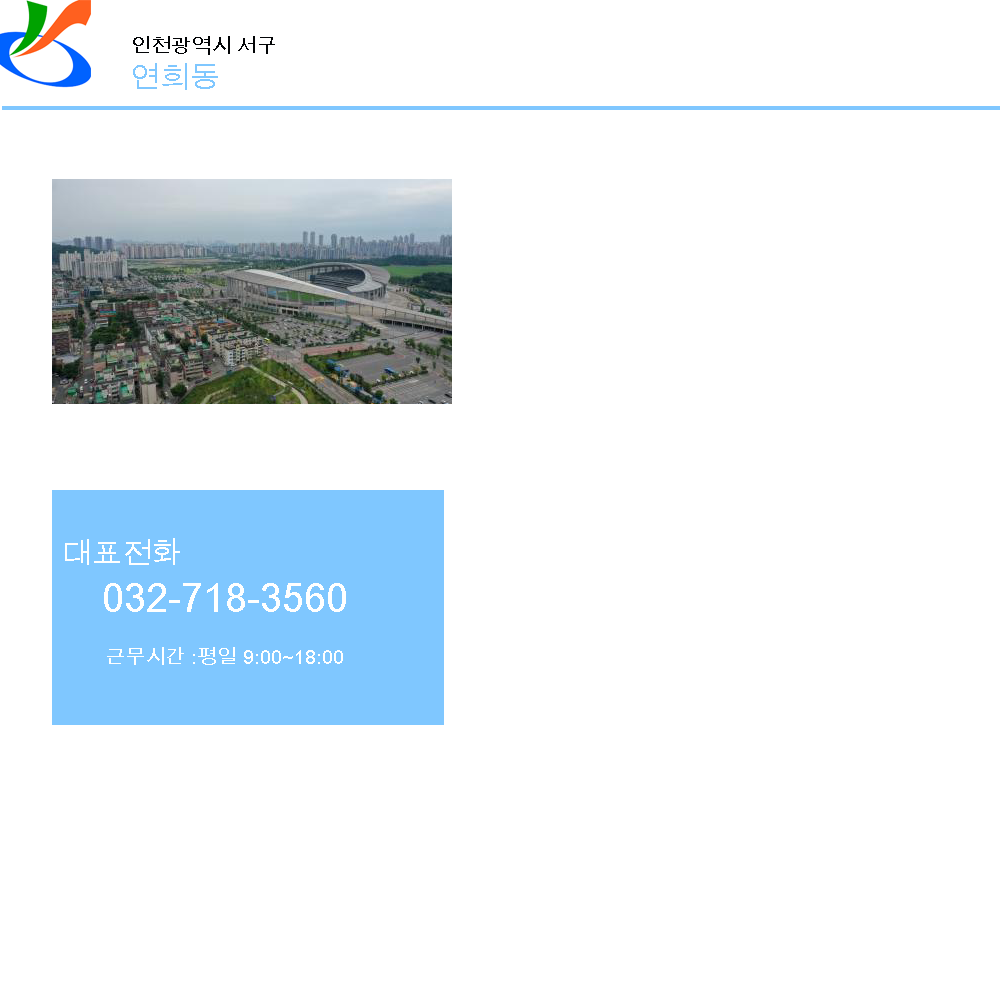
<style>
.page{position:relative;width:1000px;height:1000px;background:#ffffff}
.page>*{position:absolute;margin:0}
.t1{font:20px "ArialUnicodeMS";color:#030507}
.t2{font:30px "ArialUnicodeMS";color:#7fc7ff}
.t3{font:30px "ArialUnicodeMS";color:#ffffff}
.t4{font:40px "ArialUnicodeMS";color:#ffffff}
.t5{font:20px "ArialUnicodeMS";color:#ffffff}
</style>
<div class="page">
<p class="t1" style="left:133px;top:36px;width:142px;height:19px">인천광역시 서구</p>
<p class="t2" style="left:133px;top:63px;width:85px;height:27px">연희동</p>
<p class="t3" style="left:65px;top:538px;width:115px;height:27px">대표전화</p>
<p class="t4" style="left:104px;top:583px;width:242px;height:29px">032-718-3560</p>
<p class="t5" style="left:107px;top:647px;width:236px;height:18px">근무시간 :평일 9:00~18:00</p>
</div>
